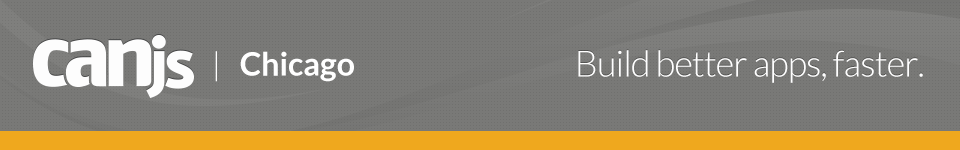
<style>
.page{position:relative;width:960px;height:150px;background:#797977}
.page>*{position:absolute;margin:0}
.t1{font:32px "Lato-Bold";color:#ffffff}
.t2{font:32px "Lato-Light";color:#ffffff}
.t3{font:36px "Lato-Light";letter-spacing:-0.025em;color:#ffffff}
</style>
<div class="page">
<p class="t1" style="left:215px;top:51px;width:139px;height:31px"><span class="t2">|</span>   Chicago</p>
<p class="t3" style="left:578px;top:50px;width:345px;height:33px">Build better apps, faster.</p>
</div>
